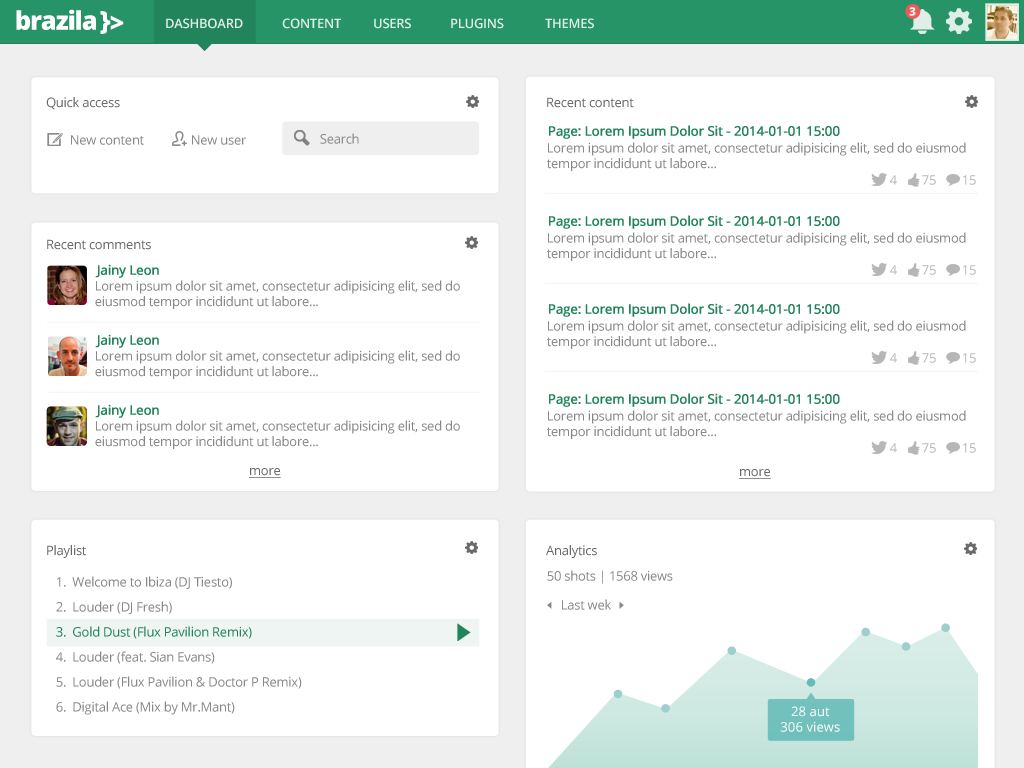
<style>
.page{position:relative;width:1024px;height:768px;background:#ffffff}
.page>*{position:absolute;margin:0}
.t1{font:25.9px "OpenSans-Extrabold";letter-spacing:-0.05em;color:#ffffff}
.t2{font:12px "OpenSans-Extrabold";letter-spacing:-0.05em;color:#dfefe8}
.t3{font:13px "OpenSans-Semibold";letter-spacing:-0.02em;color:#dfefe8}
.t4{font:13px "OpenSans";letter-spacing:-0.02em;color:#6a6a6a}
.t5{font:13px "OpenSans";letter-spacing:-0.02em;color:#22845b;font-weight:bold}
.t6{font:13px "OpenSans";letter-spacing:-0.02em;color:#888888}
.t7{font:13px "OpenSans";letter-spacing:-0.02em;color:#6a6a6a;text-decoration:underline}
.t8{font:13px/25px "OpenSans";letter-spacing:-0.02em;color:#888888}
.t9{font:13px/25px "OpenSans";letter-spacing:-0.02em;color:#22845b}
.t10{font:13px "OpenSans";letter-spacing:0.01em;color:#ffffff}
</style>
<div class="page">
<p class="t1" style="left:16px;top:9px;width:80px;height:21px">brazila</p>
<p class="t1" style="left:100px;top:11px;width:11px;height:23px">}</p>
<p class="t1" style="left:110px;top:15px;width:14px;height:15px">&gt;</p>
<p class="t2" style="left:909px;top:7px;width:7px;height:9px">3</p>
<p class="t3" style="left:166px;top:18px;width:77px;height:11px">DASHBOARD</p>
<p class="t3" style="left:282px;top:18px;width:59px;height:11px">CONTENT</p>
<p class="t3" style="left:374px;top:18px;width:37px;height:11px">USERS</p>
<p class="t3" style="left:451px;top:18px;width:53px;height:11px">PLUGINS</p>
<p class="t3" style="left:545px;top:18px;width:49px;height:11px">THEMES</p>
<p class="t4" style="left:46px;top:97px;width:74px;height:13px">Quick access</p>
<p class="t4" style="left:547px;top:97px;width:87px;height:11px">Recent content</p>
<p class="t5" style="left:549px;top:125px;width:291px;height:14px">Page: Lorem Ipsum Dolor Sit - 2014-01-01 15:00</p>
<p class="t6" style="left:71px;top:135px;width:73px;height:10px">New content</p>
<p class="t6" style="left:192px;top:135px;width:54px;height:10px">New user</p>
<p class="t6" style="left:320px;top:133px;width:39px;height:11px">Search</p>
<p class="t6" style="left:547px;top:142px;width:419px;height:29px">Lorem ipsum dolor sit amet, consectetur adipisicing elit, sed do eiusmod <br>tempor incididunt ut labore...</p>
<p class="t5" style="left:549px;top:215px;width:291px;height:14px">Page: Lorem Ipsum Dolor Sit - 2014-01-01 15:00</p>
<p class="t6" style="left:547px;top:232px;width:419px;height:29px">Lorem ipsum dolor sit amet, consectetur adipisicing elit, sed do eiusmod <br>tempor incididunt ut labore...</p>
<p class="t4" style="left:47px;top:239px;width:104px;height:11px">Recent comments</p>
<p class="t5" style="left:95px;top:264px;width:64px;height:14px">Jainy Leon</p>
<p class="t6" style="left:95px;top:280px;width:365px;height:29px">Lorem ipsum dolor sit amet, consectetur adipisicing elit, sed do <br>eiusmod tempor incididunt ut labore...</p>
<p class="t5" style="left:549px;top:303px;width:291px;height:14px">Page: Lorem Ipsum Dolor Sit - 2014-01-01 15:00</p>
<p class="t6" style="left:547px;top:320px;width:419px;height:29px">Lorem ipsum dolor sit amet, consectetur adipisicing elit, sed do eiusmod <br>tempor incididunt ut labore...</p>
<p class="t5" style="left:95px;top:334px;width:64px;height:14px">Jainy Leon</p>
<p class="t6" style="left:95px;top:350px;width:365px;height:29px">Lorem ipsum dolor sit amet, consectetur adipisicing elit, sed do <br>eiusmod tempor incididunt ut labore...</p>
<p class="t5" style="left:549px;top:393px;width:291px;height:14px">Page: Lorem Ipsum Dolor Sit - 2014-01-01 15:00</p>
<p class="t5" style="left:95px;top:404px;width:64px;height:14px">Jainy Leon</p>
<p class="t6" style="left:547px;top:410px;width:419px;height:29px">Lorem ipsum dolor sit amet, consectetur adipisicing elit, sed do eiusmod <br>tempor incididunt ut labore...</p>
<p class="t6" style="left:95px;top:420px;width:365px;height:29px">Lorem ipsum dolor sit amet, consectetur adipisicing elit, sed do <br>eiusmod tempor incididunt ut labore...</p>
<p class="t7" style="left:249px;top:468px;width:32px;height:10px">more</p>
<p class="t7" style="left:739px;top:469px;width:32px;height:10px">more</p>
<p class="t4" style="left:47px;top:545px;width:39px;height:13px">Playlist</p>
<p class="t4" style="left:546px;top:545px;width:51px;height:13px">Analytics</p>
<p class="t8" style="left:56px;top:576px;width:246px;height:139px">1.  Welcome to Ibiza (DJ Tiesto)<br>2.  Louder (DJ Fresh)<br><span class="t9">3.  Gold Dust (Flux Pavilion Remix)<br></span>4.  Louder (feat. Sian Evans)<br>5.  Louder (Flux Pavilion &amp; Doctor P Remix)<br>6.  Digital Ace (Mix by Mr.Mant)</p>
<p class="t6" style="left:547px;top:570px;width:126px;height:14px">50 shots | 1568 views</p>
<p class="t6" style="left:562px;top:599px;width:49px;height:11px">Last wek</p>
<p class="t10" style="left:780px;top:706px;width:60px;height:26px;text-align:center">28 aut<br>306 views</p>
</div>
